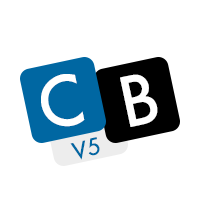
<style>
.page{position:relative;width:200px;height:200px;background:#ffffff}
.page>*{position:absolute;margin:0}
.t1{font:72px "FuturaBQ-Medium";color:#ffffff}
.t2{font:24px "FuturaBQ-Medium";color:#0067a2}
</style>
<div class="page">
<p class="t1" style="left:41px;top:74px;width:44px;height:53px;rotate:-12deg">C</p>
<p class="t1" style="left:120px;top:74px;width:38px;height:53px;rotate:-12deg">B</p>
<p class="t2" style="left:70px;top:137px;width:30px;height:23px;rotate:-12deg">V5</p>
</div>
